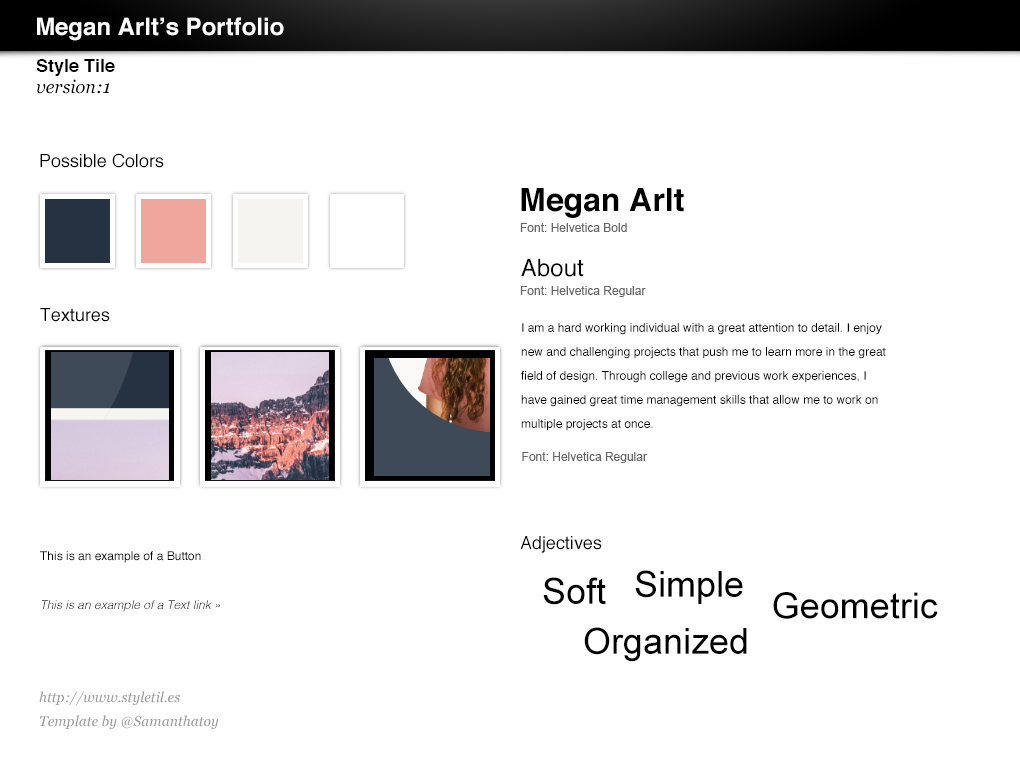
<style>
.page{position:relative;width:1020px;height:760px;background:#ffffff}
.page>*{position:absolute;margin:0}
.t1{font:24px "Helvetica-Bold";color:#ffffff}
.t2{font:18px "Helvetica-Bold";color:#000000}
.t3{font:18px "Georgia-Italic";color:#000000}
.t4{font:18px "Helvetica";color:#000000}
.t5{font:32px "Helvetica-Bold";color:#000000}
.t6{font:12px "ArialMT";color:#666666}
.t7{font:24px "Helvetica";color:#000000}
.t8{font:12px/24px "Helvetica";color:#000000}
.t9{font:12px "Helvetica";color:#000000}
.t10{font:36px "ArialMT";color:#000000}
.t11{font:12px "Helvetica-LightOblique";color:#000000}
.t12{font:14px/24px "Georgia-Italic";color:#999999}
</style>
<div class="page">
<p class="t1" style="left:37px;top:17px;width:247px;height:24px">Megan Arlt’s Portfolio</p>
<p class="t2" style="left:36px;top:59px;width:79px;height:17px">Style Tile</p>
<p class="t3" style="left:36px;top:79px;width:74px;height:15px">version:1</p>
<p class="t4" style="left:40px;top:153px;width:124px;height:15px">Possible Colors</p>
<p class="t5" style="left:521px;top:188px;width:163px;height:30px">Megan Arlt</p>
<p class="t6" style="left:520px;top:223px;width:107px;height:9px">Font: Helvetica Bold</p>
<p class="t7" style="left:521px;top:258px;width:63px;height:19px">About</p>
<p class="t6" style="left:520px;top:286px;width:126px;height:11px">Font: Helvetica Regular</p>
<p class="t4" style="left:40px;top:308px;width:70px;height:14px">Textures</p>
<p class="t8" style="left:521px;top:323px;width:365px;height:108px">I am a hard working individual with a great attention to detail. I enjoy <br>new and challenging projects that push me to learn more in the great <br>field of design. Through college and previous work experiences, I<br>have gained great time management skills that allow me to work on <br>multiple projects at once.</p>
<p class="t6" style="left:522px;top:452px;width:126px;height:11px">Font: Helvetica Regular</p>
<p class="t4" style="left:520px;top:536px;width:82px;height:17px">Adjectives</p>
<p class="t9" style="left:40px;top:551px;width:161px;height:12px">This is an example of a Button</p>
<p class="t10" style="left:543px;top:577px;width:63px;height:28px">Soft</p>
<p class="t10" style="left:635px;top:570px;width:108px;height:34px">Simple</p>
<p class="t10" style="left:773px;top:592px;width:165px;height:27px">Geometric</p>
<p class="t11" style="left:42px;top:600px;width:178px;height:12px">This is an example of a Text link »</p>
<p class="t10" style="left:584px;top:627px;width:163px;height:35px">Organized</p>
<p class="t12" style="left:39px;top:691px;width:180px;height:38px">http://www.styletil.es<br>Template by @Samanthatoy</p>
</div>
